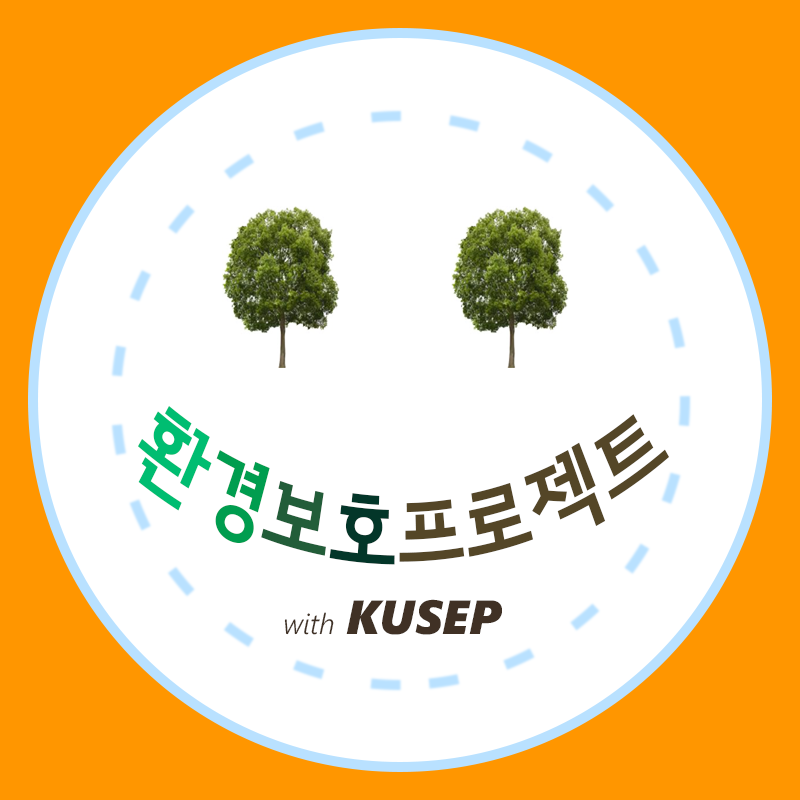
<style>
.page{position:relative;width:800px;height:800px;background:#ffffff}
.page>*{position:absolute;margin:0}
.t1{font:88.9px "KoreanDDDD-R";color:#544627;scale:0.8 1}
.t2{font:88.9px "KoreanDDDD-R";color:#00bd71;scale:0.8 1}
.t3{font:88.9px "KoreanDDDD-R";color:#009d4f;scale:0.8 1}
.t4{font:88.9px "KoreanDDDD-R";color:#225d39;scale:0.8 1}
.t5{font:88.9px "KoreanDDDD-R";color:#033629;scale:0.8 1}
.t6{font:48px "SegoeUIBlack-Italic";color:#403125}
.t7{font:28.8px "SegoeUI-SemilightItalic";color:#403125}
</style>
<div class="page">
<p class="t1" style="left:137px;top:406px;width:533px;height:159px;text-align:center"><span class="t2">환</span><span class="t3">경</span><span class="t4">보</span><span class="t5">호</span>프로젝트</p>
<p class="t6" style="left:284px;top:599px;width:218px;height:36px"><span class="t7">with </span>KUSEP</p>
</div>
